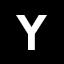
<style>
.page{position:relative;width:64px;height:64px;background:#000000}
.page>*{position:absolute;margin:0}
.t1{font:52px "FuturaPT-Demi";letter-spacing:0.1em;color:#ffffff}
</style>
<div class="page">
<p class="t1" style="left:16px;top:15px;width:31px;height:35px">Y</p>
</div>
